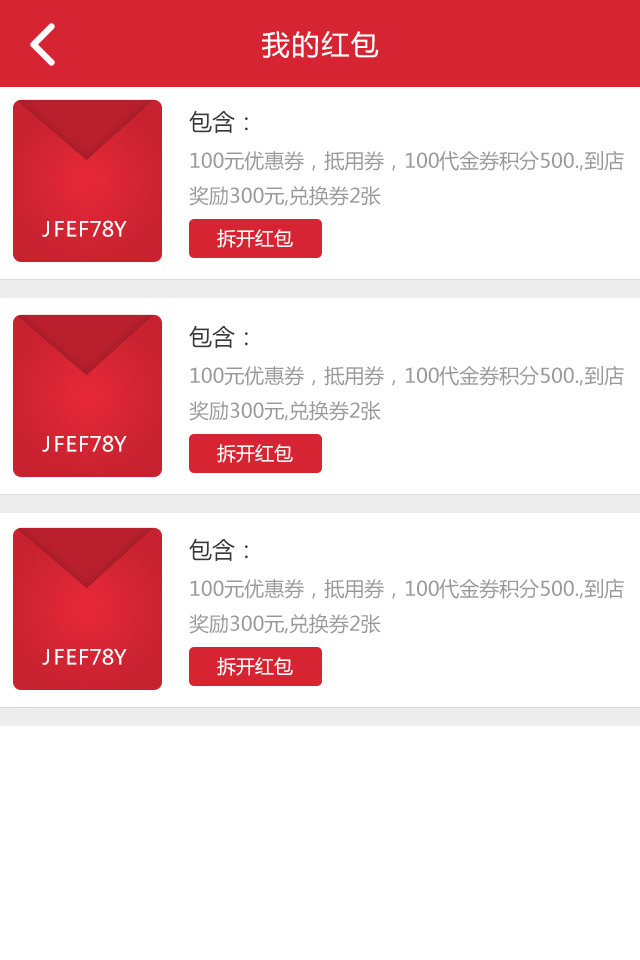
<style>
.page{position:relative;width:640px;height:960px;background:#ffffff}
.page>*{position:absolute;margin:0}
.t1{font:28px "MicrosoftYaHei";letter-spacing:0.06em;color:#ffffff}
.t2{font:20px "MicrosoftYaHei";color:#999999}
.t3{font:23px "MicrosoftYaHei";color:#383838}
.t4{font:20.4px "MicrosoftYaHei";letter-spacing:-0.4em;color:#ffffff}
.t5{font:19px "MicrosoftYaHei";color:#ffffff}
</style>
<div class="page">
<p class="t1" style="left:262px;top:31px;width:117px;height:27px">我的红包</p>
<p class="t2" style="left:189px;top:110px;width:435px;height:96px"><span class="t3">包含：<br></span>100元优惠券，抵用券，100代金券积分500.,到店<br>奖励300元,兑换券2张</p>
<p class="t4" style="left:42px;top:220px;width:85px;height:17px">ＪＦＥＦ７８Ｙ</p>
<p class="t5" style="left:217px;top:229px;width:76px;height:19px">拆开红包</p>
<p class="t2" style="left:189px;top:325px;width:435px;height:96px"><span class="t3">包含：<br></span>100元优惠券，抵用券，100代金券积分500.,到店<br>奖励300元,兑换券2张</p>
<p class="t4" style="left:42px;top:435px;width:85px;height:17px">ＪＦＥＦ７８Ｙ</p>
<p class="t5" style="left:217px;top:444px;width:76px;height:19px">拆开红包</p>
<p class="t2" style="left:189px;top:538px;width:435px;height:96px"><span class="t3">包含：<br></span>100元优惠券，抵用券，100代金券积分500.,到店<br>奖励300元,兑换券2张</p>
<p class="t4" style="left:42px;top:648px;width:85px;height:17px">ＪＦＥＦ７８Ｙ</p>
<p class="t5" style="left:217px;top:657px;width:76px;height:19px">拆开红包</p>
</div>
